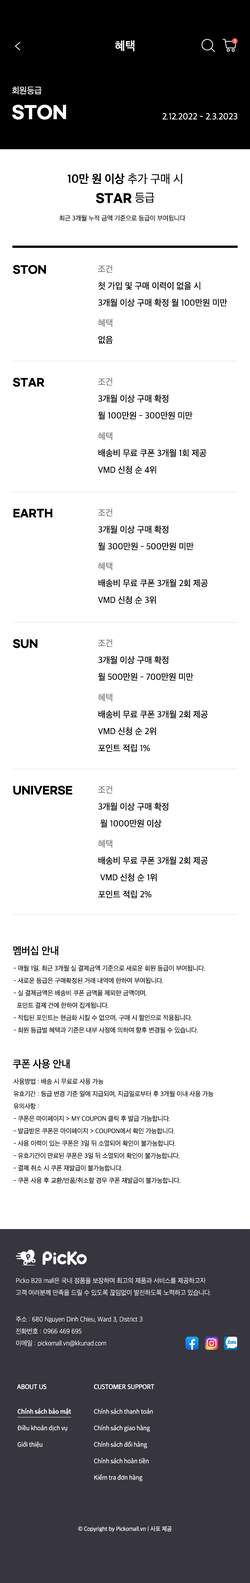
<style>
.page{position:relative;width:250px;height:1583px;background:#ffffff}
.page>*{position:absolute;margin:0}
.t1{font:12px "AppleSDGothicNeo-SemiBold";letter-spacing:0.017em;color:#ffffff}
.t2{font:3.7px "AppleSDGothicNeo-UltraLight";letter-spacing:-0.01em;color:#ffffff}
.t3{font:9px "AppleSDGothicNeo-Regular";letter-spacing:-0.01em;color:#ffffff;scale:0.97 1}
.t4{font:17.2px "GmarketSansBold";letter-spacing:-0.01em;color:#ffffff;scale:0.97 1}
.t5{font:9px "AppleSDGothicNeo-Regular";letter-spacing:-0.01em;color:#ffffff}
.t6{font:12px/18.7px "AppleSDGothicNeo-Bold";letter-spacing:-0.01em;color:#000000;text-transform:uppercase;scale:0.97 1}
.t7{font:12px/18.7px "AppleSDGothicNeo-Regular";letter-spacing:-0.01em;color:#000000;text-transform:uppercase;scale:0.97 1}
.t8{font:12px/18.7px "GmarketSansBold";letter-spacing:-0.01em;color:#000000;text-transform:uppercase;scale:0.97 1}
.t9{font:6.7px "AppleSDGothicNeo-Regular";letter-spacing:-0.01em;color:#000000}
.t10{font:10.5px "GmarketSansBold";letter-spacing:-0.01em;color:#000000}
.t11{font:9px "AppleSDGothicNeo-Regular";letter-spacing:-0.01em;color:#727272}
.t12{font:9px/16.9px "AppleSDGothicNeo-Medium";letter-spacing:-0.01em;color:#000000}
.t13{font:9px "AppleSDGothicNeo-Medium";letter-spacing:-0.01em;color:#000000}
.t14{font:10.5px "GmarketSansBold";letter-spacing:-0.01em;color:#000000;text-transform:uppercase}
.t15{font:10.5px "AppleSDGothicNeo-SemiBold";letter-spacing:-0.01em;color:#000000}
.t16{font:6.8px/12.4px "AppleSDGothicNeo-Regular";letter-spacing:-0.01em;color:#000000;text-transform:uppercase;scale:0.97 1}
.t17{font:6.7px/12px "AppleSDGothicNeo-UltraLight";letter-spacing:-0.01em;color:#ffffff;scale:0.97 1}
.t18{font:6.7px "AppleSDGothicNeo-SemiBold";letter-spacing:-0.01em;color:#ffffff;scale:0.97 1}
.t19{font:6.7px "AppleSDGothicNeo-SemiBold";letter-spacing:-0.01em;color:#ffffff;text-transform:uppercase;scale:0.97 1}
.t20{font:6px/16.5px "NotoSansCJKkr-DemiLight";letter-spacing:-0.01em;color:#ffffff;scale:0.97 1}
.t21{font:6px/16.5px "NotoSansCJKkr-Medium";letter-spacing:-0.01em;color:#ffffff;text-decoration:underline;scale:0.97 1}
.t22{font:6px "AppleSDGothicNeo-Regular";letter-spacing:-0.01em;color:#ffffff;scale:0.97 1}
</style>
<div class="page">
<p class="t1" style="left:115px;top:40px;width:19px;height:11px">혜택</p>
<p class="t2" style="left:234px;top:39px;width:2px;height:3px">0</p>
<p class="t3" style="left:12px;top:86px;width:30px;height:8px">회원등급</p>
<p class="t4" style="left:12px;top:105px;width:54px;height:15px">STON</p>
<p class="t5" style="left:162px;top:113px;width:75px;height:7px">2.12.2022 - 2.3.2023</p>
<p class="t6" style="left:67px;top:173px;width:115px;height:31px;text-align:center">10만 원 이상<span class="t7"> 추가 구매 시<br></span><span class="t8">star</span><span class="t7"> 등급</span></p>
<p class="t9" style="left:59px;top:215px;width:126px;height:6px">최근 3개월 누적 금액 기준으로 등급이 부여됩니다</p>
<p class="t10" style="left:13px;top:265px;width:33px;height:9px">STON</p>
<p class="t11" style="left:98px;top:265px;width:14px;height:8px">조건</p>
<p class="t12" style="left:98px;top:282px;width:129px;height:25px">첫 가입 및 구매 이력이 없을 시<br>3개월 이상 구매 확정 월 100만원 미만</p>
<p class="t11" style="left:98px;top:319px;width:14px;height:8px">혜택</p>
<p class="t13" style="left:98px;top:336px;width:15px;height:8px">없음</p>
<p class="t10" style="left:13px;top:378px;width:32px;height:9px">STAR</p>
<p class="t11" style="left:98px;top:378px;width:14px;height:8px">조건</p>
<p class="t12" style="left:98px;top:394px;width:94px;height:26px">3개월 이상 구매 확정<br>월 100만원 - 300만원 미만</p>
<p class="t11" style="left:98px;top:432px;width:14px;height:8px">혜택</p>
<p class="t12" style="left:98px;top:449px;width:108px;height:25px">배송비 무료 쿠폰 3개월 1회 제공<br>VMD 신청 순 4위</p>
<p class="t10" style="left:13px;top:509px;width:39px;height:8px">EARTH</p>
<p class="t11" style="left:98px;top:508px;width:14px;height:9px">조건</p>
<p class="t12" style="left:98px;top:525px;width:95px;height:25px">3개월 이상 구매 확정<br>월 300만원 - 500만원 미만</p>
<p class="t11" style="left:98px;top:562px;width:14px;height:8px">혜택</p>
<p class="t12" style="left:98px;top:579px;width:110px;height:25px">배송비 무료 쿠폰 3개월 2회 제공<br>VMD 신청 순 3위</p>
<p class="t14" style="left:13px;top:639px;width:24px;height:9px">SUN</p>
<p class="t11" style="left:98px;top:639px;width:14px;height:8px">조건</p>
<p class="t12" style="left:98px;top:656px;width:95px;height:25px">3개월 이상 구매 확정<br>월 500만원 - 700만원 미만</p>
<p class="t11" style="left:98px;top:693px;width:14px;height:9px">혜택</p>
<p class="t12" style="left:98px;top:710px;width:110px;height:42px">배송비 무료 쿠폰 3개월 2회 제공 <br>VMD 신청 순 2위<br>포인트 적립 1%</p>
<p class="t14" style="left:13px;top:786px;width:59px;height:9px">universe</p>
<p class="t11" style="left:98px;top:786px;width:14px;height:8px">조건</p>
<p class="t12" style="left:98px;top:802px;width:70px;height:26px">3개월 이상 구매 확정<br> 월 1000만원 이상</p>
<p class="t11" style="left:98px;top:840px;width:14px;height:8px">혜택</p>
<p class="t12" style="left:98px;top:856px;width:110px;height:42px">배송비 무료 쿠폰 3개월 2회 제공<br> VMD 신청 순 1위<br>포인트 적립 2%</p>
<p class="t15" style="left:13px;top:946px;width:45px;height:9px">멤버십 안내</p>
<p class="t16" style="left:13px;top:965px;width:192px;height:68px">- 매월 1일, 최근 3개월 실 결제금액 기준으로 새로운 회원 등급이 부여됩니다.<br>- 새로운 등급은 구매확정된 거래 내역에 한하여 부여됩니다.<br>- 실 결제금액은 배송비 쿠폰 금액을 제외한 금액이며,<br>  포인트 결제 건에 한하여 집계됩니다.<br>- 적립된 포인트는 현금화 시킬 수 없으며, 구매 시 할인으로 적용됩니다. <br>- 회원 등급별 혜택과 기준은 내부 사정에 의하여 향후 변경될 수 있습니다.</p>
<p class="t15" style="left:13px;top:1059px;width:57px;height:10px">쿠폰 사용 안내</p>
<p class="t16" style="left:13px;top:1078px;width:200px;height:106px">사용방법 : 배송 시 무료로 사용 가능<br>유효기간 : 등급 변경 기준 일에 지급되며, 지급일로부터 후 3개월 이내 사용 가능<br>유의사항 : <br>- 쿠폰은 마이페이지 &gt; My Coupon 클릭 후 발급 가능합니다.<br>- 발급받은 쿠폰은 마이페이지 &gt; Coupon에서 확인 가능합니다.<br>- 사용 이력이 있는 쿠폰은 3일 뒤 소멸되어 확인이 불가능합니다.<br>- 유효기간이 만료된 쿠폰은 3일 뒤 소멸되어 확인이 불가능합니다.<br>- 결제 취소 시 쿠폰 재발급이 불가능합니다.<br>- 쿠폰 사용 후 교환/반품/취소할 경우 쿠폰 재발급이 불가능합니다.</p>
<p class="t17" style="left:16px;top:1278px;width:195px;height:18px">Picko B2B mall은 국내 정품을 보장하며 최고의 제품과 서비스를 제공하고자<br>고객 여러분께 만족을 드릴 수 있도록 끊임없이 발전하도록 노력하고 있습니다.</p>
<p class="t17" style="left:16px;top:1317px;width:126px;height:30px">주소 : 680 Nguyen Dinh Chieu, Ward 3, District 3<br>전화번호 : 0966 469 695<br>이메일 : pickomall.vn@kkunad.com</p>
<p class="t18" style="left:17px;top:1384px;width:29px;height:5px">ABOUT US</p>
<p class="t19" style="left:94px;top:1384px;width:60px;height:5px">Customer Support</p>
<p class="t20" style="left:17px;top:1408px;width:54px;height:40px"><span class="t21">Chính sách bảo mật<br></span>Điều khoản dịch vụ<br>Giới thiệu</p>
<p class="t20" style="left:94px;top:1408px;width:59px;height:74px">Chính sách thanh toán<br>Chính sách giao hàng<br>Chính sách đổi hàng<br>Chính sách hoàn tiền<br>Kiểm tra đơn hàng</p>
<p class="t22" style="left:78px;top:1526px;width:94px;height:6px">© Copyright by Pickomall.vn | 사포 제공</p>
</div>
